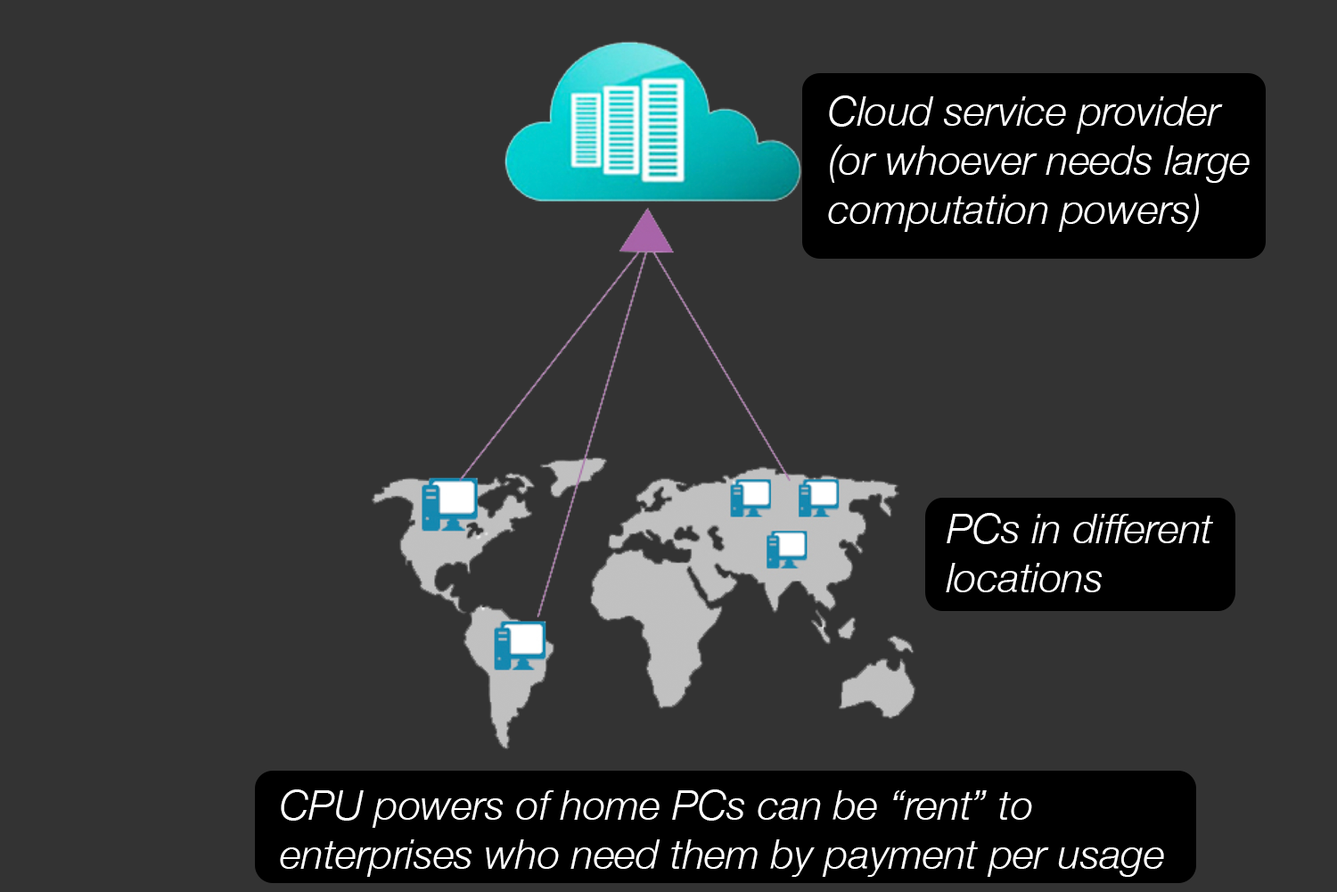
<style>
.page{position:relative;width:1337px;height:892px;background:#333333}
.page>*{position:absolute;margin:0}
.t1{font:40.9px "HelveticaNeue-LightItalic";color:#ffffff}
</style>
<div class="page">
<p class="t1" style="left:828px;top:95px;width:422px;height:137px">Cloud service provider <br>(or whoever needs large computation powers)</p>
<p class="t1" style="left:946px;top:513px;width:267px;height:79px">PCs in different locations</p>
<p class="t1" style="left:280px;top:789px;width:884px;height:87px">CPU powers of home PCs can be “rent” to <br>enterprises who need them by payment per usage</p>
</div>
